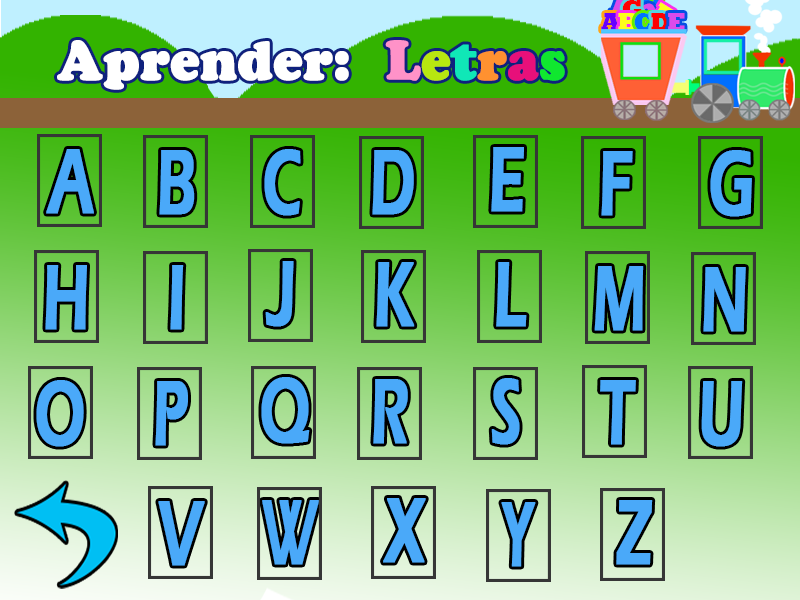
<style>
.page{position:relative;width:800px;height:600px}
.page>*{position:absolute;margin:0}
.t1{font:6.2px/29px "Rockwell-ExtraBold";letter-spacing:-0.05em}
.t2{font:6.1px "Rockwell-ExtraBold";letter-spacing:-0.05em}
.t3{font:6.2px/29px "Rockwell-ExtraBold";letter-spacing:-0.05em;color:#6600ff}
.t4{font:6.2px/29px "Rockwell-ExtraBold";letter-spacing:-0.05em;color:#0072ff}
.t5{font:6.2px/29px "Rockwell-ExtraBold";letter-spacing:-0.05em;color:#da4beb}
.t6{font:53.6px "CooperBlackStd";color:#ffffff;font-weight:bold;scale:0.95 1}
.t7{font:53.6px "CooperBlackStd";color:#ff92c8;font-weight:bold;scale:0.95 1}
.t8{font:53.6px "CooperBlackStd";color:#b7e710;font-weight:bold;scale:0.95 1}
.t9{font:53.6px "CooperBlackStd";color:#10e7b7;font-weight:bold;scale:0.95 1}
.t10{font:53.6px "CooperBlackStd";color:#ff9130;font-weight:bold;scale:0.95 1}
.t11{font:53.6px "CooperBlackStd";color:#e7107a;font-weight:bold;scale:0.95 1}
.t12{font:53.6px "CooperBlackStd";color:#10e72f;font-weight:bold;scale:0.95 1}
.t13{font:95.3px "ErasITC-Demi";letter-spacing:-0.01em;color:#4aa9f9;font-weight:bold;scale:0.63 1}
.t14{font:95.1px "ErasITC-Demi";letter-spacing:-0.01em;color:#4aa9f9;font-weight:bold;scale:0.53 1}
</style>
<div class="page">
<p class="t1" style="left:622px;top:0px;width:20px;height:18px">G</p>
<p class="t2" style="left:651px;top:2px;width:25px;height:21px;rotate:32deg">F</p>
<p class="t3" style="left:601px;top:13px;width:19px;height:18px">A</p>
<p class="t1" style="left:618px;top:13px;width:20px;height:18px">B</p>
<p class="t4" style="left:634px;top:13px;width:19px;height:18px">C</p>
<p class="t1" style="left:651px;top:13px;width:20px;height:18px">D</p>
<p class="t5" style="left:668px;top:13px;width:17px;height:18px">E</p>
<p class="t6" style="left:57px;top:40px;width:508px;height:50px">Aprender:<span class="t7">  L</span><span class="t8">e</span><span class="t9">t</span><span class="t10">r</span><span class="t11">a</span><span class="t12">s</span></p>
<p class="t13" style="left:46px;top:149px;width:48px;height:65px">A</p>
<p class="t13" style="left:159px;top:150px;width:36px;height:65px">B</p>
<p class="t13" style="left:264px;top:149px;width:37px;height:67px">C</p>
<p class="t13" style="left:372px;top:150px;width:42px;height:65px">D</p>
<p class="t13" style="left:491px;top:147px;width:33px;height:65px">E</p>
<p class="t13" style="left:710px;top:150px;width:42px;height:67px">G</p>
<p class="t13" style="left:601px;top:151px;width:32px;height:65px">F</p>
<p class="t13" style="left:45px;top:265px;width:42px;height:65px">H</p>
<p class="t13" style="left:170px;top:265px;width:14px;height:65px">I</p>
<p class="t13" style="left:265px;top:261px;width:29px;height:66px">J</p>
<p class="t13" style="left:376px;top:262px;width:39px;height:65px">K</p>
<p class="t13" style="left:496px;top:262px;width:31px;height:65px">L</p>
<p class="t13" style="left:594px;top:266px;width:50px;height:65px">M</p>
<p class="t13" style="left:703px;top:267px;width:43px;height:65px">N</p>
<p class="t13" style="left:261px;top:377px;width:49px;height:67px">Q</p>
<p class="t13" style="left:36px;top:380px;width:48px;height:67px">O</p>
<p class="t13" style="left:155px;top:381px;width:33px;height:65px">P</p>
<p class="t13" style="left:373px;top:379px;width:35px;height:65px">R</p>
<p class="t13" style="left:491px;top:378px;width:29px;height:67px">S</p>
<p class="t13" style="left:600px;top:380px;width:36px;height:65px">T</p>
<p class="t13" style="left:701px;top:381px;width:42px;height:66px">U</p>
<p class="t13" style="left:158px;top:501px;width:47px;height:65px">V</p>
<p class="t14" style="left:262px;top:500px;width:57px;height:65px">W</p>
<p class="t13" style="left:383px;top:498px;width:43px;height:65px">X</p>
<p class="t14" style="left:501px;top:502px;width:35px;height:65px">Y</p>
<p class="t13" style="left:616px;top:500px;width:37px;height:65px">Z</p>
</div>
